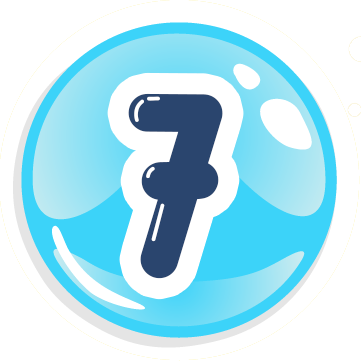
<style>
.page{position:relative;width:361px;height:364px;background:#ffffff}
.page>*{position:absolute;margin:0}
.t1{font:262.5px "BubbleBobble";color:#2a456e}
</style>
<div class="page">
<p class="t1" style="left:128px;top:93px;width:95px;height:186px">7</p>
</div>
